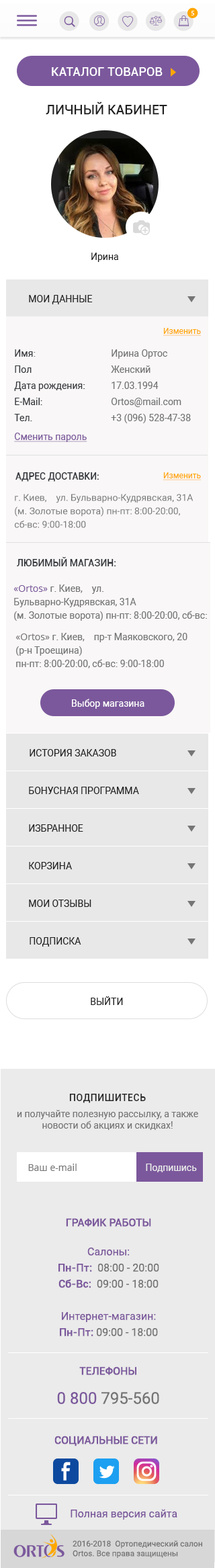
<style>
.page{position:relative;width:215px;height:1568px;background:#ebebeb}
.page>*{position:absolute;margin:0}
.t1{font:6.9px "MyriadPro-Regular";letter-spacing:0.1em;color:#ffffff;text-transform:uppercase}
.t2{font:12.1px "Roboto-Medium";letter-spacing:0.01em;color:#ffffff;text-transform:uppercase}
.t3{font:13.4px "Roboto-Medium";color:#212121;text-transform:uppercase}
.t4{font:9.4px "Roboto-Regular";color:#212121}
.t5{font:9.4px "Roboto-Regular";color:#212121;text-transform:uppercase}
.t6{font:8.1px "Roboto-Regular";color:#ffa700;text-decoration:underline}
.t7{font:9.4px/16.1px "Roboto-Regular";color:#757575}
.t8{font:9.4px/16.1px "Roboto-Regular";color:#34373d}
.t9{font:9.4px/18.8px "Roboto-Regular";color:#7b589c;text-decoration:underline}
.t10{font:9.4px "Roboto-Medium";color:#34373d;text-transform:uppercase}
.t11{font:9.4px/13.4px "Roboto-Regular";color:#757575}
.t12{font:9.4px/13.4px "OpenSans";color:#7b589c}
.t13{font:9.4px/13.4px "OpenSans";color:#757575}
.t14{font:9.4px "Roboto-Regular";color:#ffffff}
.t15{font:9.4px "Roboto-Medium";letter-spacing:0.05em;color:#212121;text-transform:uppercase}
.t16{font:9.4px "Roboto-Regular";color:#757575}
.t17{font:9.4px "OpenSans";color:#757575}
.t18{font:9.4px "Roboto-Regular";color:#ebebeb}
.t19{font:10.7px/16.1px "Roboto-Regular";color:#7b589c}
.t20{font:10.7px "Roboto-Medium";color:#7b589c;text-transform:uppercase}
.t21{font:10.7px/16.1px "Roboto-Medium";color:#7b589c}
.t22{font:10.7px/16.1px "Roboto-Regular";color:#757575}
.t23{font:16.1px/16.1px "Roboto-Regular";color:#7b589c}
.t24{font:16.1px/16.1px "Roboto-Regular";color:#757575}
.t25{font:10.7px "Roboto-Regular";color:#7b589c}
.t26{font:8.1px "Roboto-Regular";color:#757575}
</style>
<div class="page">
<p class="t1" style="left:191px;top:11px;width:3px;height:4px">5</p>
<p class="t2" style="left:52px;top:67px;width:111px;height:9px">Каталог товаров</p>
<p class="t3" style="left:46px;top:101px;width:121px;height:14px">Личный кабинет</p>
<p class="t4" style="left:91px;top:253px;width:27px;height:9px">Ирина</p>
<p class="t5" style="left:29px;top:295px;width:64px;height:9px">Мои данные</p>
<p class="t6" style="left:163px;top:328px;width:39px;height:8px">Изменить</p>
<p class="t7" style="left:14px;top:349px;width:177px;height:93px"><span class="t8">Имя</span>:     Ирина Ортос<br><span class="t8">Пол</span>    Женский<br><span class="t8">Дата рождения: </span>  17.03.1994<br><span class="t8">E-Mail:  </span>   Ortos@mail.com<br><span class="t8">Тел. </span>     +3 (096) 528-47-38<br><span class="t9">Сменить пароль</span></p>
<p class="t10" style="left:15px;top:472px;width:84px;height:10px">Адрес доставки:</p>
<p class="t6" style="left:163px;top:472px;width:39px;height:8px">Изменить</p>
<p class="t11" style="left:15px;top:494px;width:178px;height:34px">г. Киев,    ул. Бульварно-Кудрявская, 31А <br>(м. Золотые ворота) пн-пт: 8:00-20:00, сб-вс: 9:00-18:00</p>
<p class="t10" style="left:17px;top:557px;width:99px;height:9px">любимый магазин:</p>
<p class="t11" style="left:13px;top:584px;width:194px;height:37px"><span class="t12">«Ortos» </span>г. Киев,    ул. Бульварно-Кудрявская, 31А <br>(м. Золотые ворота) пн-пт: 8:00-20:00, сб-вс: 9:00-18:00</p>
<p class="t11" style="left:15px;top:633px;width:172px;height:35px"><span class="t13">«Ortos» </span>г. Киев,    пр-т Маяковского, 20 (р-н Троещина)<br>пн-пт: 8:00-20:00, сб-вс: 9:00-18:00</p>
<p class="t14" style="left:72px;top:699px;width:72px;height:10px">Выбор магазина</p>
<p class="t5" style="left:30px;top:749px;width:86px;height:7px">История заказов</p>
<p class="t5" style="left:29px;top:787px;width:110px;height:7px">Бонусная программа</p>
<p class="t5" style="left:29px;top:824px;width:54px;height:8px">Избранное</p>
<p class="t5" style="left:29px;top:862px;width:44px;height:7px">Корзина</p>
<p class="t5" style="left:29px;top:900px;width:62px;height:7px">Мои отзывы</p>
<p class="t5" style="left:30px;top:937px;width:51px;height:10px">Подписка</p>
<p class="t5" style="left:91px;top:996px;width:32px;height:9px">Выйти</p>
<p class="t7" style="left:17px;top:1094px;width:181px;height:36px;text-align:center"><span class="t15">Подпишитесь <br></span>и получайте полезную рассылку, а также <span class="t16">новости об акциях и скидках!</span></p>
<p class="t17" style="left:28px;top:1164px;width:49px;height:7px">Ваш e-mail</p>
<p class="t18" style="left:146px;top:1164px;width:51px;height:8px">Подпишись</p>
<p class="t19" style="left:58px;top:1218px;width:101px;height:118px;text-align:center"><span class="t20">График работы<br><br></span>Салоны: <br><span class="t21">Пн-Пт:</span><span class="t22">  08:00 - 20:00 <br></span><span class="t21">Сб-Вс:</span><span class="t22">  09:00 - 18:00<br><br></span>Интернет-магазин:<br><span class="t21">Пн-Пт:</span><span class="t22"> 09:00 - 18:00</span></p>
<p class="t20" style="left:57px;top:1366px;width:102px;height:38px;text-align:center">Телефоны<br><br><span class="t23">0 800 </span><span class="t24">795-560</span></p>
<p class="t20" style="left:54px;top:1436px;width:103px;height:10px">Социальные сети</p>
<p class="t25" style="left:71px;top:1509px;width:106px;height:11px">Полная версия сайта</p>
<p class="t26" style="left:73px;top:1540px;width:129px;height:18px">2016-2018  Ортопедический салон Ortos. Все права защищены</p>
</div>
